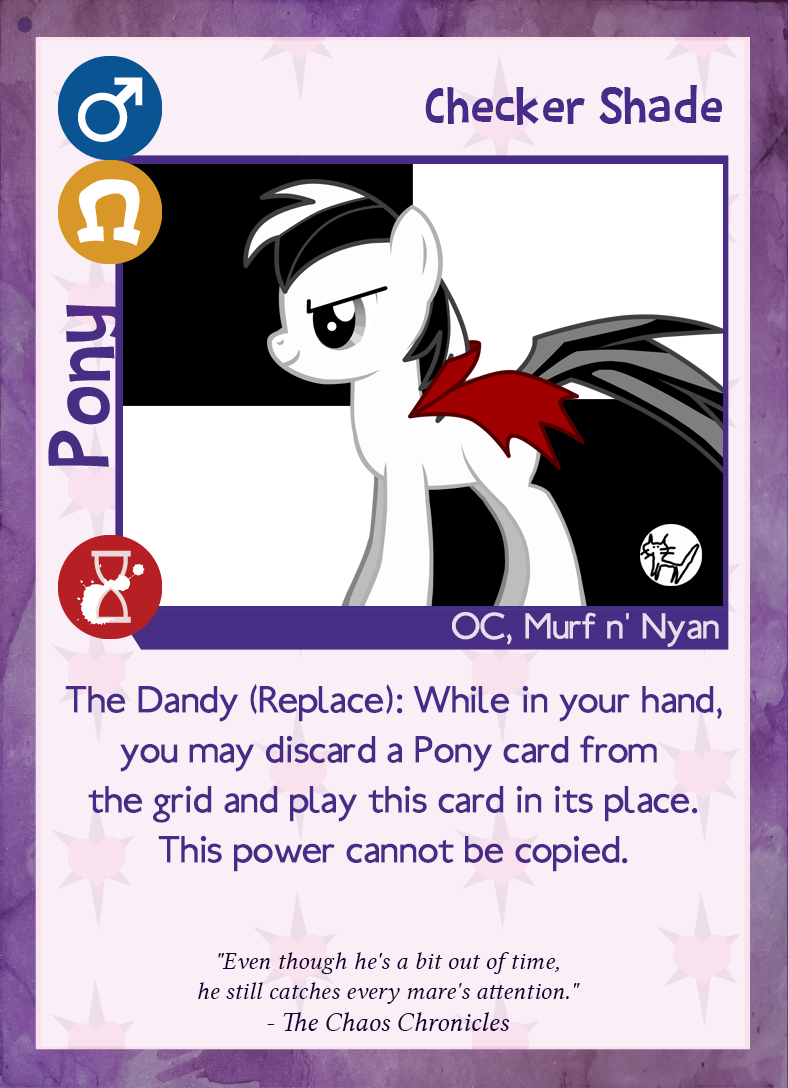
<style>
.page{position:relative;width:788px;height:1088px;background:#faeff6}
.page>*{position:absolute;margin:0}
.t1{font:56.2px "BarthowheelRegular";color:#462c89}
.t2{font:39.8px "Ubahn";color:#eadcec}
.t3{font:41.7px "Ubahn";color:#462c89}
.t4{font:25px "LinLibertineI";color:#190233}
.t5{font:27.1px "LinLibertineI";color:#190233}
</style>
<div class="page">
<p class="t1" style="left:425px;top:85px;width:297px;height:40px">Checker Shade</p>
<p class="t2" style="left:452px;top:612px;width:267px;height:35px">OC, Murf n' Nyan</p>
<p class="t3" style="left:65px;top:683px;width:657px;height:189px;text-align:center">The Dandy (Replace): While in your hand,<br>you may discard a Pony card from <br>the grid and play this card in its place.<br>This power cannot be copied.</p>
<p class="t4" style="left:198px;top:952px;width:382px;height:79px;text-align:center">"Even though he's a bit out of time,<br>he still catches every mare's attention."<br>- <span class="t5">The Chaos Chronicles</span></p>
</div>
